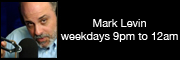
<style>
.page{position:relative;width:180px;height:60px;background:#000000}
.page>*{position:absolute;margin:0}
.t1{font:11px "HelveticaNeue";color:#ffffff}
</style>
<div class="page">
<p class="t1" style="left:60px;top:19px;width:118px;height:23px;text-align:center">Mark Levin<br>weekdays 9pm to 12am</p>
</div>
